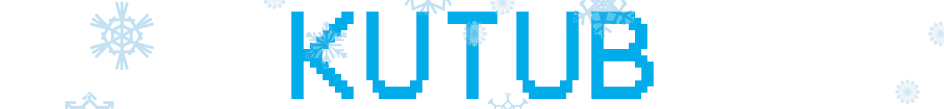
<style>
.page{position:relative;width:944px;height:109px;background:#ffffff}
.page>*{position:absolute;margin:0}
.t1{font:100px "Terminal";color:#00adea}
</style>
<div class="page">
<p class="t1" style="left:291px;top:11px;width:363px;height:88px">KUTUB</p>
</div>
